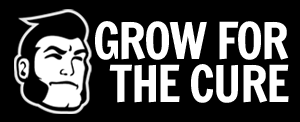
<style>
.page{position:relative;width:300px;height:122px;background:#000000}
.page>*{position:absolute;margin:0}
.t1{font:49.6px/42.4px "FrancoisOne-Regular";letter-spacing:-0.04em;color:#ffffff}
</style>
<div class="page">
<p class="t1" style="left:95px;top:21px;width:194px;height:82px;text-align:right">GROW FOR<br>THE CURE</p>
</div>
